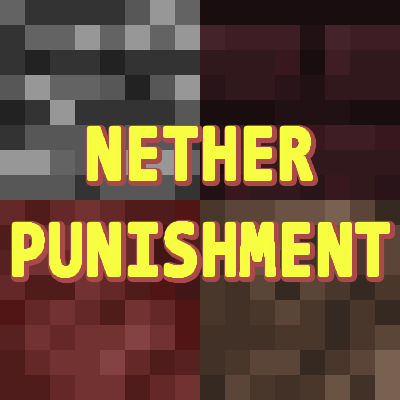
<style>
.page{position:relative;width:400px;height:400px}
.page>*{position:absolute;margin:0}
.t1{font:80px "Consolas-Bold";letter-spacing:0.05em;color:#f7fe41;scale:0.8 1}
</style>
<div class="page">
<p class="t1" style="left:14px;top:128px;width:374px;height:148px;text-align:center">NETHER<br>PUNISHMENT</p>
</div>
